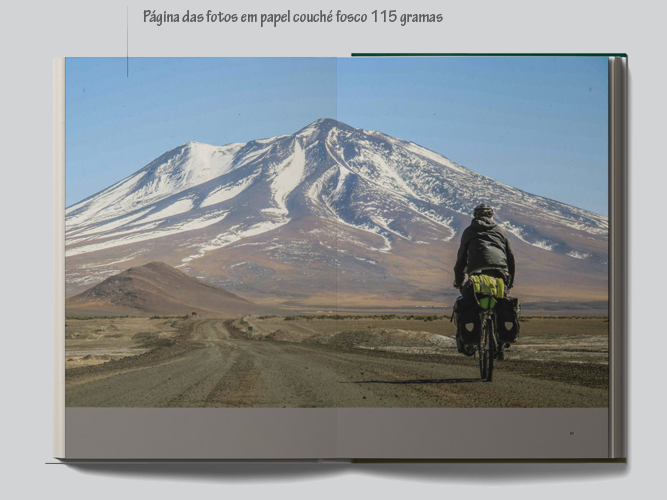
<style>
.page{position:relative;width:667px;height:500px;background:#d2d3d5}
.page>*{position:absolute;margin:0}
.t1{font:17.7px "TektonPro-BoldCond";color:#5c5c5c}
</style>
<div class="page">
<p class="t1" style="left:143px;top:10px;width:300px;height:17px">Página das fotos em papel couché fosco 115 gramas</p>
</div>
